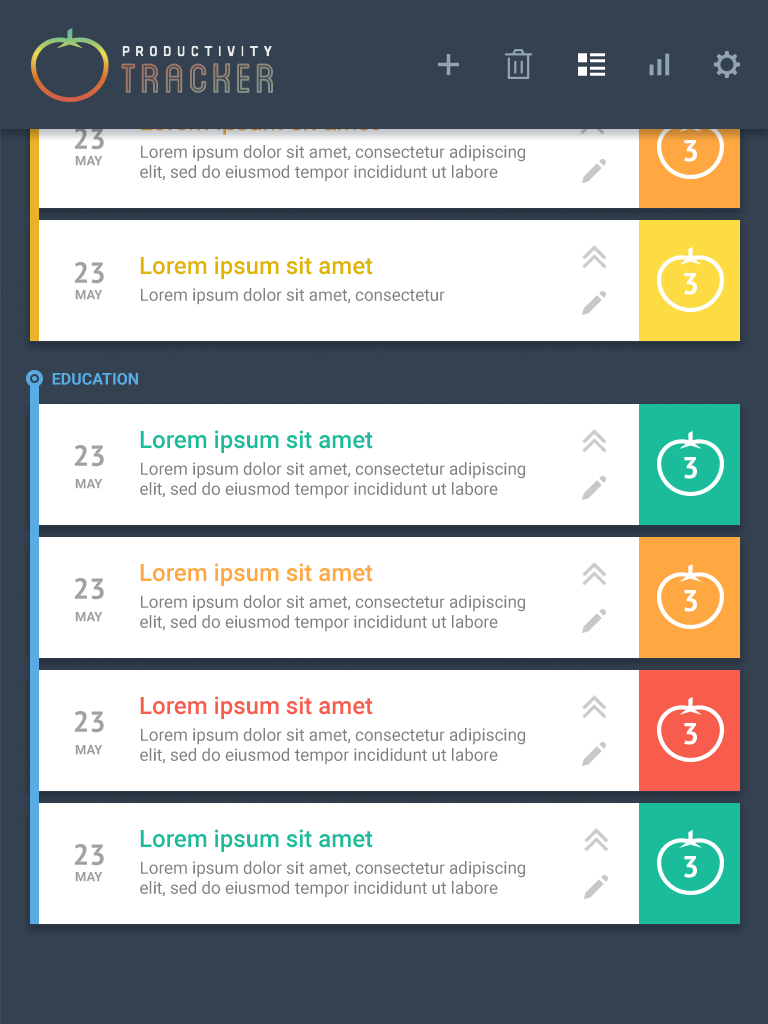
<style>
.page{position:relative;width:768px;height:1024px;background:#ffffff}
.page>*{position:absolute;margin:0}
.t1{font:24px "HelveticaNeue-Medium";color:#344150}
.t2{font:29px "PTSans-Bold";color:#a1a1a1}
.t3{font:17px/20px "Roboto-Regular";color:#7f7f7f}
.t4{font:30px "PTSans-Bold";color:#ffffff}
.t5{font:13px "Roboto-Bold";color:#9e9e9e}
.t6{font:24px "Roboto-Medium";color:#dfb500}
.t7{font:17px "Roboto-Regular";color:#7f7f7f}
.t8{font:16px "Roboto-Bold";color:#59abe3}
.t9{font:24px "Roboto-Medium";color:#1abc9c}
.t10{font:24px "Roboto-Medium";color:#ffa841}
.t11{font:24px "Roboto-Medium";color:#f75c4c}
</style>
<div class="page">
<p class="t1" style="left:140px;top:113px;width:238px;height:22px">Lorem ipsum sit amet</p>
<p class="t2" style="left:74px;top:128px;width:30px;height:22px">23</p>
<p class="t3" style="left:140px;top:145px;width:385px;height:37px">Lorem ipsum dolor sit amet, consectetur adipiscing elit, sed do eiusmod tempor incididunt ut labore</p>
<p class="t4" style="left:684px;top:140px;width:13px;height:22px">3</p>
<p class="t5" style="left:75px;top:156px;width:28px;height:10px">MAY</p>
<p class="t6" style="left:140px;top:256px;width:233px;height:23px">Lorem ipsum sit amet</p>
<p class="t2" style="left:74px;top:262px;width:30px;height:22px">23</p>
<p class="t4" style="left:684px;top:273px;width:13px;height:22px">3</p>
<p class="t5" style="left:75px;top:290px;width:28px;height:10px">MAY</p>
<p class="t7" style="left:141px;top:288px;width:304px;height:17px">Lorem ipsum dolor sit amet, consectetur</p>
<p class="t8" style="left:52px;top:373px;width:86px;height:12px">EDUCATION</p>
<p class="t9" style="left:140px;top:430px;width:233px;height:23px">Lorem ipsum sit amet</p>
<p class="t2" style="left:74px;top:445px;width:30px;height:22px">23</p>
<p class="t3" style="left:140px;top:462px;width:385px;height:37px">Lorem ipsum dolor sit amet, consectetur adipiscing elit, sed do eiusmod tempor incididunt ut labore</p>
<p class="t4" style="left:684px;top:457px;width:13px;height:22px">3</p>
<p class="t5" style="left:75px;top:479px;width:28px;height:10px">MAY</p>
<p class="t10" style="left:140px;top:563px;width:233px;height:23px">Lorem ipsum sit amet</p>
<p class="t2" style="left:74px;top:578px;width:30px;height:22px">23</p>
<p class="t4" style="left:684px;top:590px;width:13px;height:22px">3</p>
<p class="t3" style="left:140px;top:595px;width:385px;height:37px">Lorem ipsum dolor sit amet, consectetur adipiscing elit, sed do eiusmod tempor incididunt ut labore</p>
<p class="t5" style="left:75px;top:612px;width:28px;height:10px">MAY</p>
<p class="t11" style="left:140px;top:696px;width:233px;height:23px">Lorem ipsum sit amet</p>
<p class="t2" style="left:74px;top:711px;width:30px;height:22px">23</p>
<p class="t4" style="left:684px;top:723px;width:13px;height:22px">3</p>
<p class="t3" style="left:140px;top:728px;width:385px;height:37px">Lorem ipsum dolor sit amet, consectetur adipiscing elit, sed do eiusmod tempor incididunt ut labore</p>
<p class="t5" style="left:75px;top:745px;width:28px;height:10px">MAY</p>
<p class="t9" style="left:140px;top:829px;width:233px;height:23px">Lorem ipsum sit amet</p>
<p class="t2" style="left:74px;top:844px;width:30px;height:22px">23</p>
<p class="t4" style="left:684px;top:856px;width:13px;height:22px">3</p>
<p class="t3" style="left:140px;top:861px;width:385px;height:37px">Lorem ipsum dolor sit amet, consectetur adipiscing elit, sed do eiusmod tempor incididunt ut labore</p>
<p class="t5" style="left:75px;top:872px;width:28px;height:10px">MAY</p>
</div>
